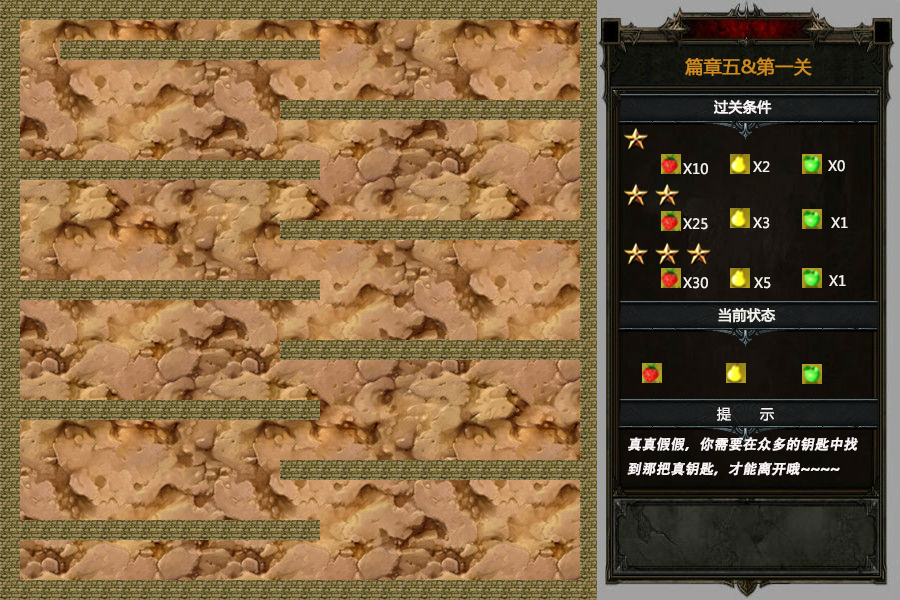
<style>
.page{position:relative;width:900px;height:600px}
.page>*{position:absolute;margin:0}
.t1{font:18px "MicrosoftYaHei";color:#cf8b20;font-weight:bold}
.t2{font:14px "MicrosoftYaHei";color:#f9f3f3;font-weight:bold}
.t3{font:14px "MicrosoftYaHei";color:#f1f0e9}
.t4{font:14px "MicrosoftYaHei";color:#f1f0e9;font-weight:bold}
.t5{font:14px "MicrosoftYaHei";color:#f9f3f3}
.t6{font:14px "AdobeHeitiStd-Regular";color:#f9f3f3;font-weight:bold;font-style:italic}
</style>
<div class="page">
<p class="t1" style="left:685px;top:57px;width:127px;height:19px">篇章五&amp;第一关</p>
<p class="t2" style="left:714px;top:100px;width:58px;height:15px">过关条件</p>
<p class="t3" style="left:753px;top:161px;width:17px;height:11px">X2</p>
<p class="t3" style="left:828px;top:160px;width:17px;height:12px">X0</p>
<p class="t3" style="left:683px;top:163px;width:25px;height:12px">X10</p>
<p class="t3" style="left:683px;top:218px;width:25px;height:12px">X25</p>
<p class="t3" style="left:753px;top:217px;width:17px;height:12px">X3</p>
<p class="t3" style="left:831px;top:217px;width:17px;height:11px">X1</p>
<p class="t3" style="left:683px;top:277px;width:25px;height:12px">X30</p>
<p class="t3" style="left:754px;top:277px;width:17px;height:12px">X5</p>
<p class="t3" style="left:829px;top:275px;width:17px;height:11px">X1</p>
<p class="t4" style="left:718px;top:308px;width:58px;height:15px">当前状态</p>
<p class="t5" style="left:717px;top:407px;width:57px;height:14px">提       示</p>
<p class="t6" style="left:627px;top:437px;width:231px;height:39px">真真假假，你需要在众多的钥匙中找到那把真钥匙，才能离开哦~~~~</p>
</div>
